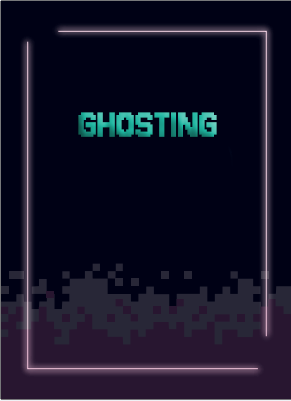
<style>
.page{position:relative;width:291px;height:401px;background:#000115}
.page>*{position:absolute;margin:0}
.t1{font:45px "Jersey10-Regular"}
</style>
<div class="page">
<p class="t1" style="left:78px;top:112px;width:139px;height:25px">GHOSTING</p>
</div>
